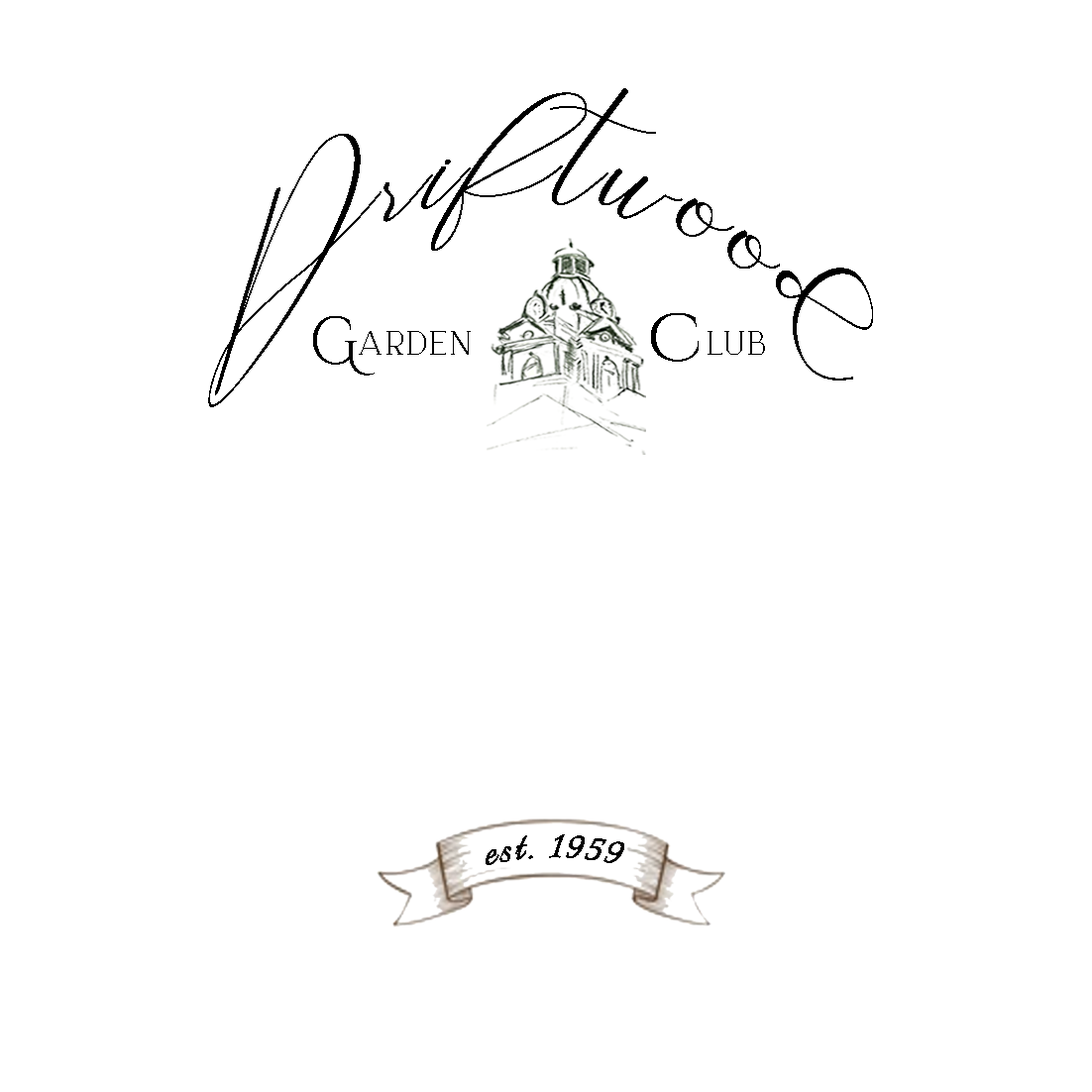
<style>
.page{position:relative;width:1092px;height:1092px;background:#ffffff}
.page>*{position:absolute;margin:0}
.t1{font:76.4px "Bathey";letter-spacing:0.078em;color:#000000;scale:0.93 1}
.t2{font:76.5px "Bathey";letter-spacing:0.078em;color:#000000;scale:0.93 1}
.t3{font:67.2px "CinzelDecorative-Regular";letter-spacing:0.078em;color:#000000;scale:0.87 1}
.t4{font:67.2px "CinzelDecorative-Regular";letter-spacing:0.078em;color:#000000;scale:1.11 1}
.t5{font:35.1px "Brooke";letter-spacing:0.078em;color:#000000;scale:1.1 1}
.t6{font:35.1px "Brooke";letter-spacing:0.078em;color:#000000;scale:1.05 1}
.t7{font:49.7px "Italianno-Regular";letter-spacing:0.078em;color:#000000;scale:0.86 1}
</style>
<div class="page">
<p class="t1" style="left:208px;top:88px;width:665px;height:319px;rotate:6deg"><span class="t2">D</span>riftwood</p>
<p class="t3" style="left:313px;top:316px;width:62px;height:60px">G</p>
<p class="t4" style="left:651px;top:313px;width:48px;height:49px">c</p>
<p class="t5" style="left:359px;top:331px;width:112px;height:24px">arden</p>
<p class="t6" style="left:708px;top:331px;width:57px;height:24px">lub</p>
<p class="t7" style="left:486px;top:834px;width:138px;height:31px">est. 1959</p>
</div>
